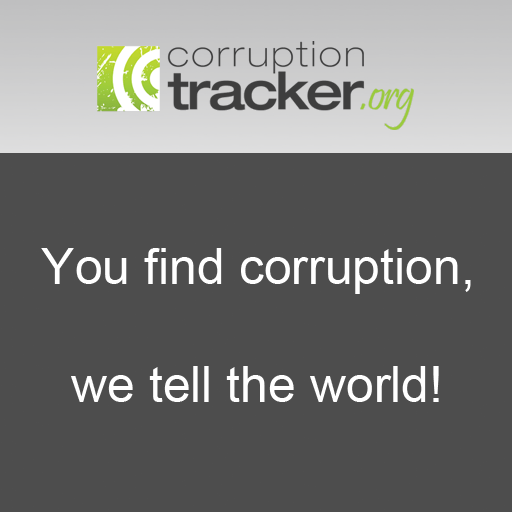
<style>
.page{position:relative;width:512px;height:512px;background:#4d4d4d}
.page>*{position:absolute;margin:0}
.t1{font:50px "ArialMT";color:#ffffff}
</style>
<div class="page">
<p class="t1" style="left:41px;top:248px;width:430px;height:46px">You find corruption,</p>
<p class="t1" style="left:71px;top:366px;width:368px;height:36px">we tell the world!</p>
</div>
